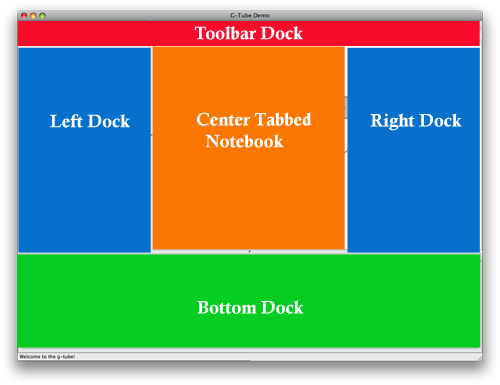
<style>
.page{position:relative;width:500px;height:385px;background:#0571cd}
.page>*{position:absolute;margin:0}
.t1{font:18px "CalisMTBol";color:#ffffff}
.t2{font:18px "CalisMTBol";color:#fffefe}
</style>
<div class="page">
<p class="t1" style="left:194px;top:26px;width:109px;height:14px">Toolbar Dock</p>
<p class="t2" style="left:197px;top:112px;width:115px;height:36px">Center Tabbed <br>  Notebook</p>
<p class="t2" style="left:370px;top:113px;width:92px;height:18px">Right Dock</p>
<p class="t2" style="left:50px;top:114px;width:80px;height:14px">Left Dock</p>
<p class="t2" style="left:197px;top:300px;width:107px;height:14px">Bottom Dock</p>
</div>
